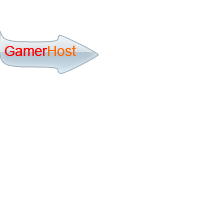
<style>
.page{position:relative;width:200px;height:200px;background:#ffffff}
.page>*{position:absolute;margin:0}
.t1{font:14px "ArialMT";color:#ff0000}
.t2{font:14px "ArialMT";color:#ff6600}
</style>
<div class="page">
<p class="t1" style="left:4px;top:45px;width:72px;height:11px">Gamer<span class="t2">Host</span></p>
</div>
